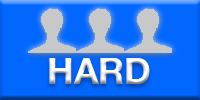
<style>
.page{position:relative;width:200px;height:100px;background:#0267ff}
.page>*{position:absolute;margin:0}
.t1{font:36px "HelveticaNeue-Bold";color:#ffffff}
</style>
<div class="page">
<p class="t1" style="left:49px;top:58px;width:101px;height:26px">HARD</p>
</div>
